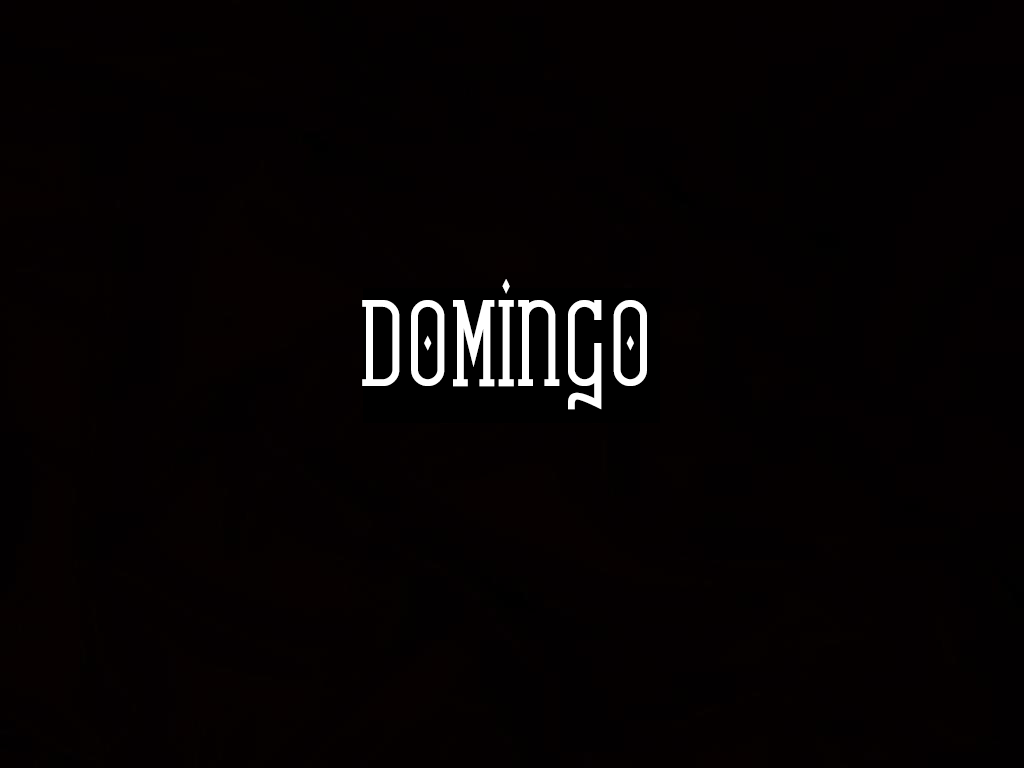
<style>
.page{position:relative;width:1024px;height:768px;background:#040000}
.page>*{position:absolute;margin:0}
.t1{font:132px "CatharsisRequiemBold";letter-spacing:-0.003em;color:#ffffff}
</style>
<div class="page">
<p class="t1" style="left:362px;top:279px;width:285px;height:131px">domingo</p>
</div>
